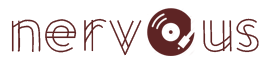
<style>
.page{position:relative;width:272px;height:64px;background:#ffffff}
.page>*{position:absolute;margin:0}
.t1{font:60px "BluePrinted";color:#5e2424}
</style>
<div class="page">
<p class="t1" style="left:11px;top:18px;width:248px;height:38px">nerv   us</p>
</div>
